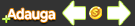
<style>
.page{position:relative;width:135px;height:26px;background:#333333}
.page>*{position:absolute;margin:0}
.t1{font:14.3px "Montserrat-Bold";letter-spacing:-0.04em;color:#ffffff;scale:0.88 1}
</style>
<div class="page">
<p class="t1" style="left:6px;top:8px;width:49px;height:14px">Adauga</p>
</div>
